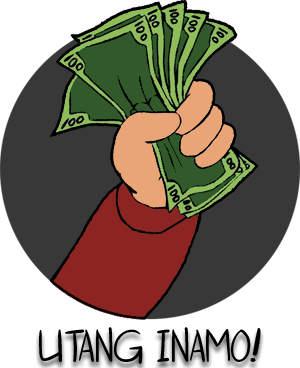
<style>
.page{position:relative;width:300px;height:368px;background:#383838}
.page>*{position:absolute;margin:0}
.t1{font:46.4px "OtakuRant";color:#000000}
</style>
<div class="page">
<p class="t1" style="left:39px;top:327px;width:222px;height:37px">Utang Inamo!</p>
</div>
